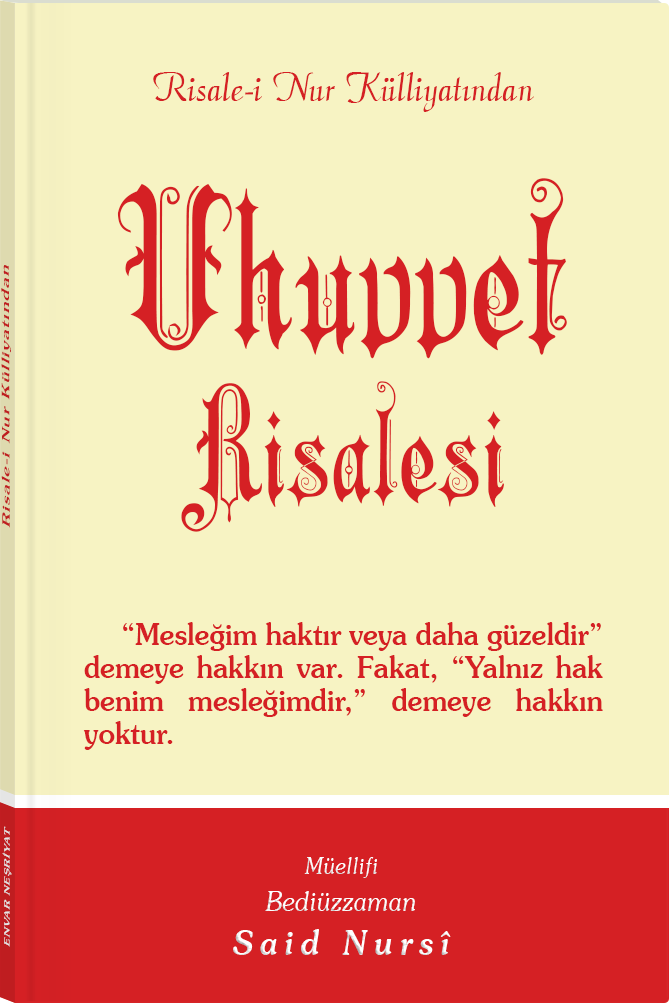
<style>
.page{position:relative;width:669px;height:1003px;background:#f7f3c3}
.page>*{position:absolute;margin:0}
.t1{font:45.3px "Barla © 072 Aria ScriptScriptSSi";color:#d52024;scale:0.94 1}
.t2{font:153.2px/153.9px "Barla © 001 Liva Nur";letter-spacing:-0.001em;color:#d52024;scale:0.93 1}
.t3{font:216.2px/192.9px "Barla © 001 Liva Nur";letter-spacing:-0.001em;color:#d52024;scale:0.93 1}
.t4{font:11.4px "Souvenir-Medium";letter-spacing:0.08em;color:#d52024;scale:1.65 1}
.t5{font:30.3px/33px "Souvenir-Medium";color:#d52024;scale:0.92 1}
.t6{font:8.3px "Souvenir-Medium";letter-spacing:0.08em;color:#e5e5e5;scale:1.43 1}
.t7{font:27.1px/37.8px "Souvenir-LightItalic";color:#ffffff;scale:0.92 1}
.t8{font:22.8px/39.8px "Souvenir-LightItalic";color:#ffffff;scale:0.92 1}
.t9{font:33.9px/43.8px "Souvenir-MediumItalic";letter-spacing:0.2em;color:#ffffff;scale:0.92 1}
</style>
<div class="page">
<p class="t1" style="left:153px;top:72px;width:381px;height:40px">Risale-i Nur Külliyatından</p>
<p class="t2" style="left:117px;top:178px;width:450px;height:354px;text-align:center"><span class="t3">Uhuvvet<br></span>Risalesi</p>
<p class="t4" style="left:1px;top:265px;width:10px;height:263px;rotate:-90deg">Risale-i Nur Külliyatından</p>
<p class="t5" style="left:83px;top:622px;width:520px;height:128px;text-align:justify">“Mesleğim haktır veya daha güzeldir” demeye hakkın var. Fakat, “Yalnız hak benim mesleğimdir,” demeye hakkın yoktur.</p>
<p class="t6" style="left:2px;top:826px;width:10px;height:121px;rotate:-90deg">ENVAR NEŞRİYAT</p>
<p class="t7" style="left:233px;top:857px;width:218px;height:98px;text-align:center"><span class="t8">Müellifi<br></span>Bediüzzaman<br><span class="t9">Said Nursî</span></p>
</div>
